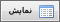
<style>
.page{position:relative;width:60px;height:22px}
.page>*{position:absolute;margin:0}
.t1{font:8px "Tahoma"}
</style>
<div class="page">
<p class="t1" style="left:9px;top:6px;width:23px;height:9px">نمایش</p>
</div>
